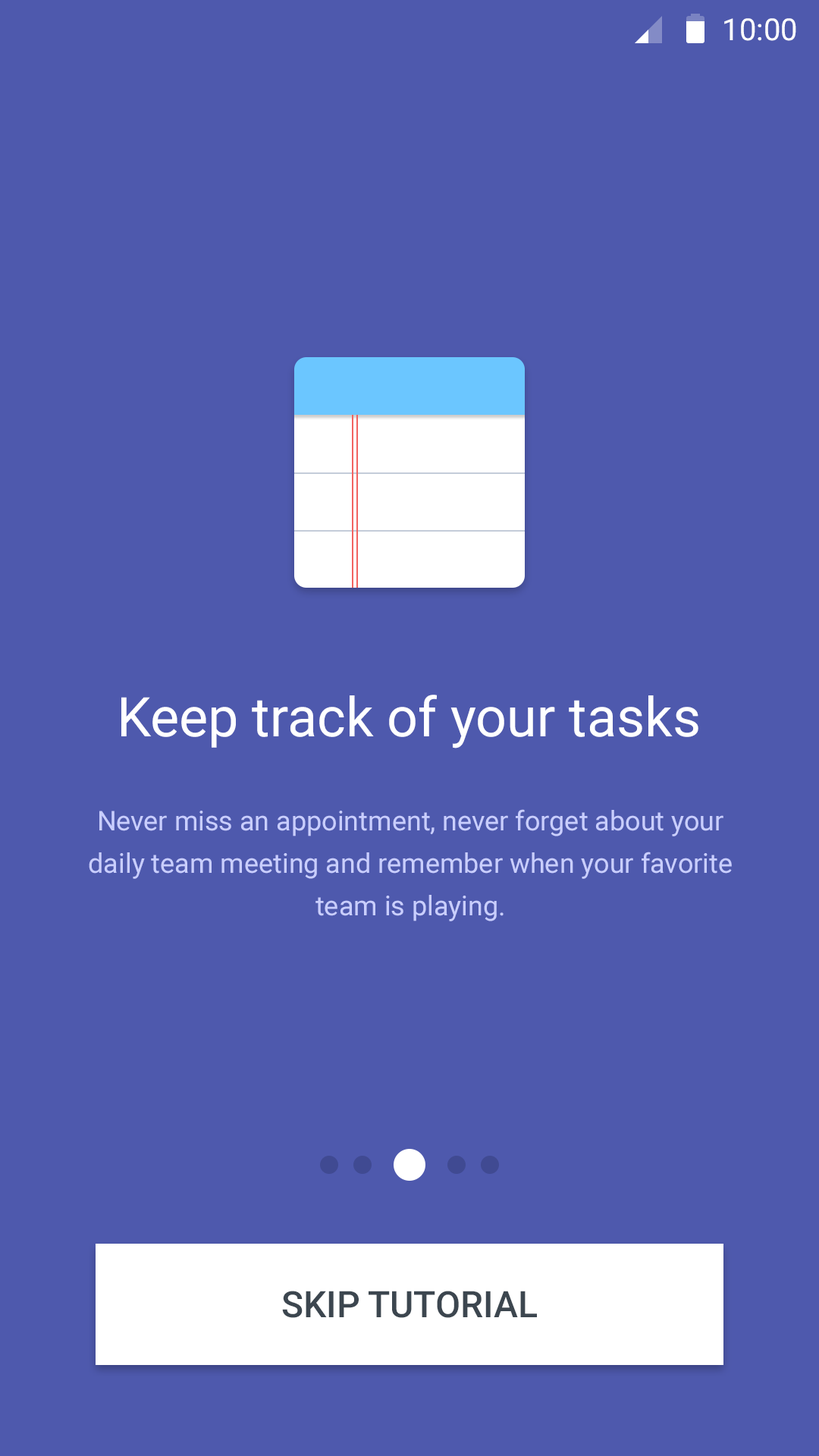
<style>
.page{position:relative;width:819px;height:1456px;background:#4e59ad}
.page>*{position:absolute;margin:0}
.t1{font:30.3px "Roboto-Regular";color:#ffffff}
.t2{font:54.6px "Roboto-Regular";color:#ffffff}
.t3{font:27.3px/42.5px "Roboto-Regular";color:#c9ceff}
.t4{font:36.4px "Roboto-Medium";color:#3c464f}
</style>
<div class="page">
<p class="t1" style="left:724px;top:18px;width:72px;height:23px">10:00</p>
<p class="t2" style="left:121px;top:695px;width:577px;height:53px">Keep track of your tasks</p>
<p class="t3" style="left:89px;top:809px;width:643px;height:112px;text-align:center">Never miss an appointment, never forget about your<br>daily team meeting and remember when your favorite<br>team is playing.</p>
<p class="t4" style="left:282px;top:1291px;width:255px;height:27px">SKIP TUTORIAL</p>
</div>
